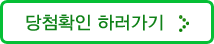
<style>
.page{position:relative;width:214px;height:44px;background:#ffffff}
.page>*{position:absolute;margin:0}
.t1{font:18px "YDIYGO330";color:#0f8117}
</style>
<div class="page">
<p class="t1" style="left:26px;top:14px;width:137px;height:17px">당첨확인 하러가기</p>
</div>
